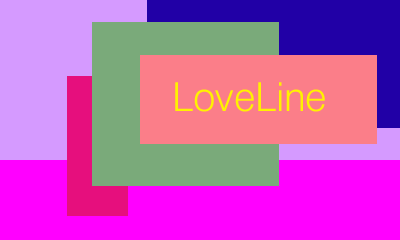
<style>
.page{position:relative;width:400px;height:240px;background:#ff00ff}
.page>*{position:absolute;margin:0}
.t1{font:40px "Swiss721BT-Light";color:#fff200}
</style>
<div class="page">
<p class="t1" style="left:175px;top:82px;width:150px;height:30px">LoveLine</p>
</div>
